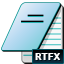
<style>
.page{position:relative;width:64px;height:64px;background:#ffffff}
.page>*{position:absolute;margin:0}
.t1{font:10px "Ubuntu-Bold";color:#ffffff}
</style>
<div class="page">
<p class="t1" style="left:35px;top:53px;width:25px;height:7px">RTFX</p>
</div>
